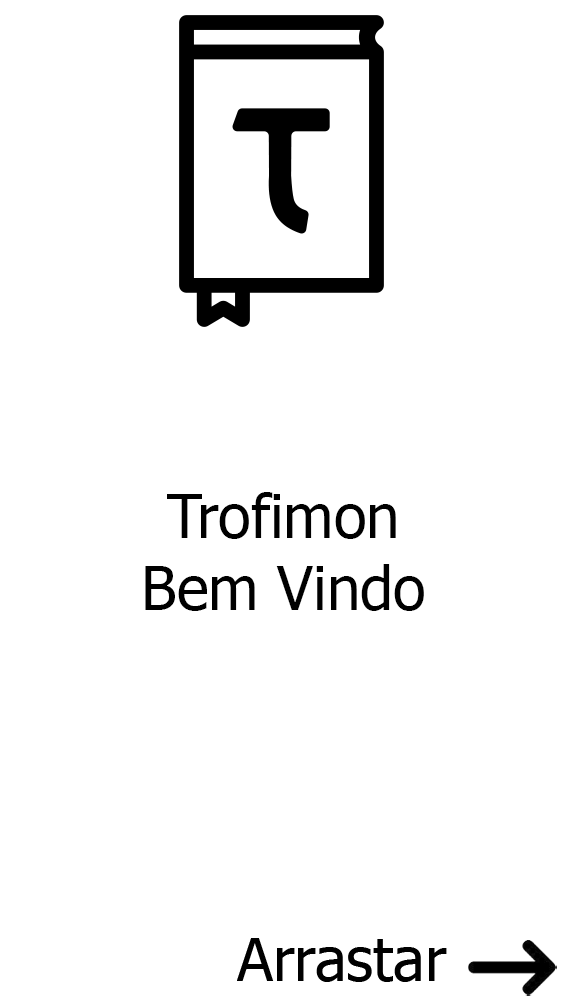
<style>
.page{position:relative;width:563px;height:1001px;background:#ffffff}
.page>*{position:absolute;margin:0}
.t1{font:60px "Tahoma";color:#000000}
</style>
<div class="page">
<p class="t1" style="left:145px;top:492px;width:279px;height:119px;text-align:center">Trofimon<br>Bem Vindo</p>
</div>
